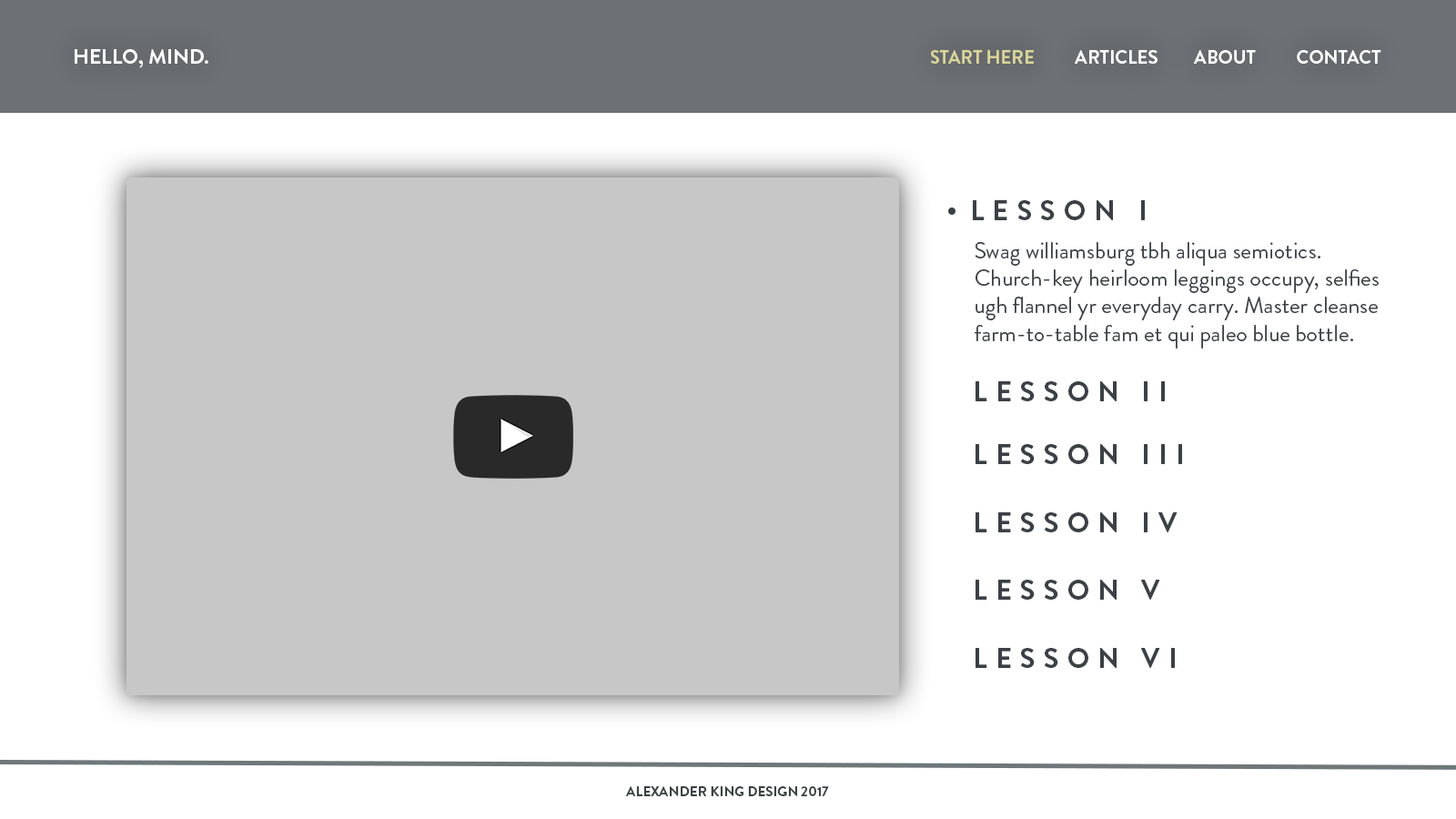
<style>
.page{position:relative;width:1456px;height:819px;background:#ffffff}
.page>*{position:absolute;margin:0}
.t1{font:20.8px "BrandonGrotesque-Bold";color:#ffffff;text-transform:uppercase}
.t2{font:18.5px "BrandonGrotesque-Bold";color:#d9d599;text-transform:uppercase}
.t3{font:18.5px "BrandonGrotesque-Bold";color:#ffffff;text-transform:uppercase}
.t4{font:27.7px "BrandonGrotesque-Bold";letter-spacing:0.3em;color:#3c4046;text-transform:uppercase}
.t5{font:23.1px "BrandonGrotesque-Regular";color:#3c4046}
</style>
<div class="page">
<p class="t1" style="left:75px;top:49px;width:133px;height:19px">Hello, Mind.</p>
<p class="t2" style="left:931px;top:50px;width:103px;height:14px">Start herE</p>
<p class="t3" style="left:1075px;top:50px;width:306px;height:14px">Articles         about          contact</p>
<p class="t4" style="left:973px;top:200px;width:172px;height:20px">Lesson I</p>
<p class="t5" style="left:975px;top:242px;width:404px;height:107px">Swag williamsburg tbh aliqua semiotics. Church-key heirloom leggings occupy, selfies ugh flannel yr everyday carry. Master cleanse farm-to-table fam et qui paleo blue bottle.</p>
<p class="t4" style="left:976px;top:381px;width:189px;height:20px">Lesson II</p>
<p class="t4" style="left:976px;top:444px;width:206px;height:20px">Lesson III</p>
<p class="t4" style="left:976px;top:512px;width:202px;height:20px">Lesson IV</p>
<p class="t4" style="left:976px;top:580px;width:184px;height:20px">Lesson V</p>
<p class="t4" style="left:976px;top:648px;width:199px;height:20px">Lesson VI</p>
</div>
